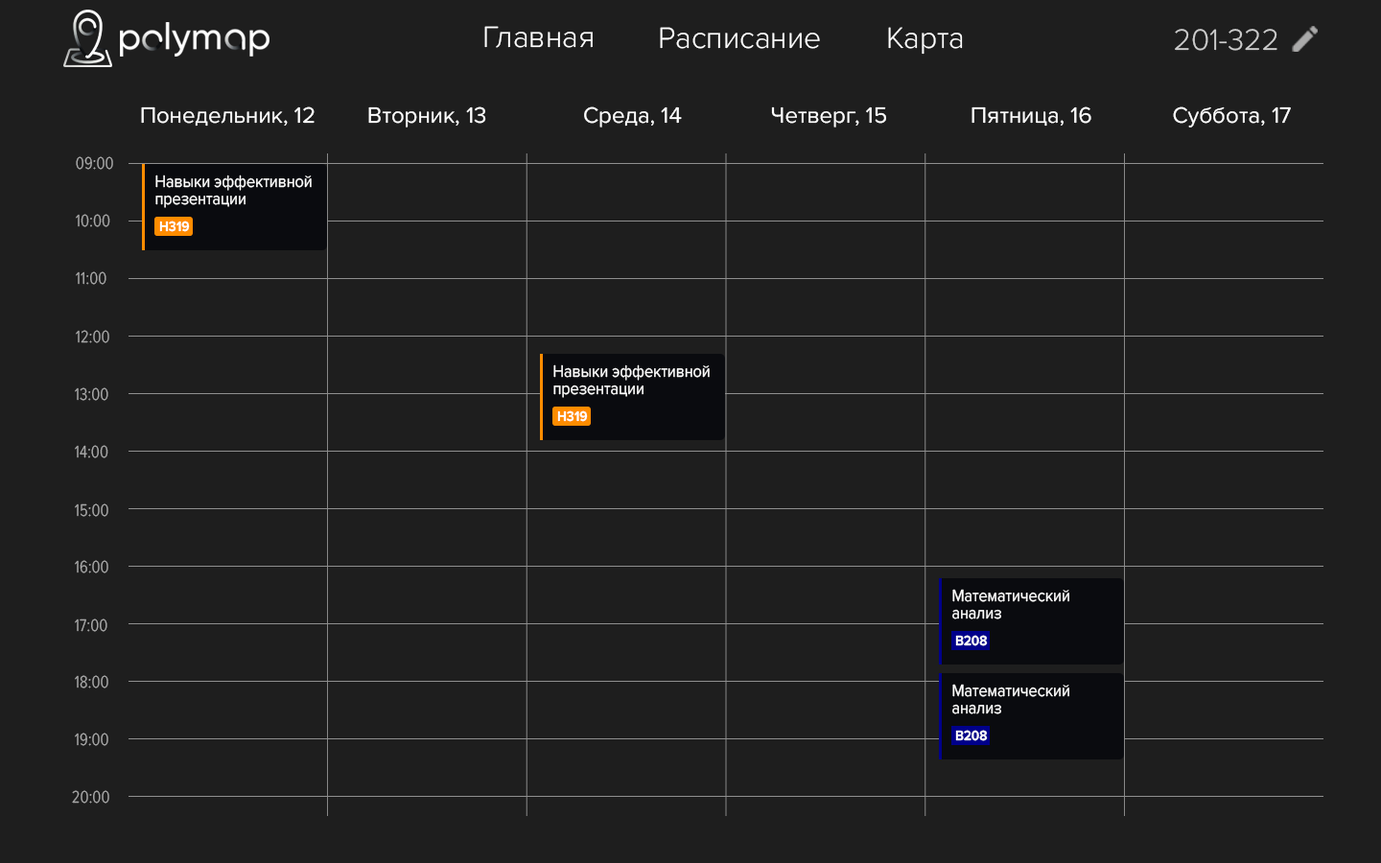
<style>
.page{position:relative;width:1381px;height:863px;background:#1e1e1e}
.page>*{position:absolute;margin:0}
.t1{font:30.7px "ProximaNova-Light";color:#ffffff}
.t2{font:30.7px "ProximaNova-Light";color:#cccccc}
.t3{font:23px "ProximaNova-Regular";color:#ffffff}
.t4{font:17.3px "ProximaNovaCond-Light";color:#a8a8a8}
.t5{font:17.3px/17.3px "ProximaNova-Regular";color:#ffffff;scale:0.9 1}
.t6{font:14.4px "ProximaNova-Bold";color:#ffffff;scale:0.9 1}
</style>
<div class="page">
<p class="t1" style="left:484px;top:26px;width:109px;height:22px">Главная</p>
<p class="t1" style="left:660px;top:27px;width:160px;height:22px">Расписание</p>
<p class="t1" style="left:888px;top:27px;width:75px;height:28px">Карта</p>
<p class="t2" style="left:1175px;top:29px;width:103px;height:22px">201-322</p>
<p class="t3" style="left:141px;top:106px;width:174px;height:21px">Понедельник, 12</p>
<p class="t3" style="left:368px;top:106px;width:118px;height:22px">Вторник, 13</p>
<p class="t3" style="left:584px;top:106px;width:98px;height:22px">Среда, 14</p>
<p class="t3" style="left:771px;top:106px;width:115px;height:22px">Четверг, 15</p>
<p class="t3" style="left:972px;top:106px;width:120px;height:21px">Пятница, 16</p>
<p class="t3" style="left:1173px;top:106px;width:118px;height:22px">Суббота, 17</p>
<p class="t4" style="left:76px;top:156px;width:37px;height:14px">09:00</p>
<p class="t5" style="left:155px;top:175px;width:157px;height:33px">Навыки эффективной презентации</p>
<p class="t4" style="left:76px;top:214px;width:34px;height:13px">10:00</p>
<p class="t6" style="left:159px;top:221px;width:31px;height:11px">H319</p>
<p class="t4" style="left:76px;top:271px;width:30px;height:14px">11:00</p>
<p class="t4" style="left:76px;top:330px;width:33px;height:13px">12:00</p>
<p class="t5" style="left:553px;top:365px;width:157px;height:33px">Навыки эффективной презентации</p>
<p class="t4" style="left:75px;top:388px;width:33px;height:13px">13:00</p>
<p class="t6" style="left:557px;top:411px;width:31px;height:11px">H319</p>
<p class="t4" style="left:75px;top:445px;width:33px;height:14px">14:00</p>
<p class="t4" style="left:75px;top:504px;width:33px;height:13px">15:00</p>
<p class="t4" style="left:75px;top:560px;width:33px;height:14px">16:00</p>
<p class="t5" style="left:952px;top:589px;width:118px;height:31px">Математический анализ</p>
<p class="t4" style="left:75px;top:619px;width:32px;height:13px">17:00</p>
<p class="t6" style="left:955px;top:635px;width:33px;height:12px">B2087</p>
<p class="t4" style="left:75px;top:675px;width:33px;height:14px">18:00</p>
<p class="t5" style="left:952px;top:684px;width:118px;height:31px">Математический анализ</p>
<p class="t4" style="left:75px;top:733px;width:33px;height:13px">19:00</p>
<p class="t6" style="left:955px;top:730px;width:33px;height:11px">B208</p>
<p class="t4" style="left:72px;top:790px;width:37px;height:14px">20:00</p>
</div>
